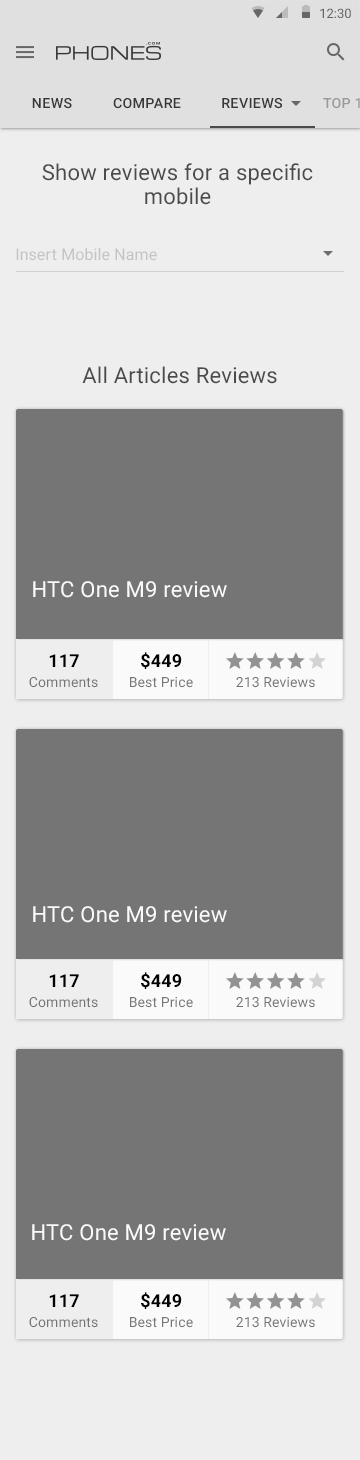
<style>
.page{position:relative;width:360px;height:1460px;background:#757575}
.page>*{position:absolute;margin:0}
.t1{font:14px "Roboto-Medium";letter-spacing:0.01em;color:#373737}
.t2{font:22px/24px "Roboto-Regular";letter-spacing:0.01em;color:#4b4b4b}
.t3{font:16px "Roboto-Regular";letter-spacing:0.01em;color:#c4c4c4}
.t4{font:22px "Roboto-Regular";letter-spacing:0.01em;color:#4b4b4b}
.t5{font:22px "Roboto-Regular";letter-spacing:0.01em;color:#fafafa}
.t6{font:18px "Roboto-Bold";letter-spacing:0.01em;color:#000000}
.t7{font:14px "Roboto-Regular";letter-spacing:0.01em;color:#757575}
</style>
<div class="page">
<p class="t1" style="left:32px;top:98px;width:40px;height:11px">NEWS</p>
<p class="t1" style="left:113px;top:98px;width:68px;height:11px">COMPARE</p>
<p class="t1" style="left:222px;top:98px;width:60px;height:11px">REVIEWS</p>
<p class="t2" style="left:42px;top:163px;width:271px;height:42px;text-align:center">Show reviews for a specific<br>mobile</p>
<p class="t3" style="left:16px;top:248px;width:141px;height:13px">Insert Mobile Name</p>
<p class="t4" style="left:82px;top:366px;width:195px;height:18px">All Articles Reviews</p>
<p class="t5" style="left:33px;top:581px;width:194px;height:17px">HTC One M9 review</p>
<p class="t6" style="left:49px;top:654px;width:30px;height:13px">117</p>
<p class="t6" style="left:141px;top:652px;width:41px;height:17px">$449</p>
<p class="t7" style="left:29px;top:677px;width:69px;height:11px">Comments</p>
<p class="t7" style="left:130px;top:677px;width:63px;height:11px">Best Price</p>
<p class="t7" style="left:236px;top:677px;width:79px;height:11px">213 Reviews</p>
<p class="t5" style="left:33px;top:906px;width:194px;height:17px">HTC One M9 review</p>
<p class="t6" style="left:49px;top:974px;width:30px;height:13px">117</p>
<p class="t6" style="left:141px;top:972px;width:41px;height:17px">$449</p>
<p class="t7" style="left:29px;top:997px;width:69px;height:11px">Comments</p>
<p class="t7" style="left:130px;top:997px;width:63px;height:11px">Best Price</p>
<p class="t7" style="left:236px;top:997px;width:79px;height:11px">213 Reviews</p>
<p class="t5" style="left:32px;top:1224px;width:194px;height:17px">HTC One M9 review</p>
<p class="t6" style="left:49px;top:1294px;width:30px;height:13px">117</p>
<p class="t6" style="left:141px;top:1292px;width:41px;height:17px">$449</p>
<p class="t7" style="left:29px;top:1317px;width:69px;height:11px">Comments</p>
<p class="t7" style="left:130px;top:1317px;width:63px;height:11px">Best Price</p>
<p class="t7" style="left:236px;top:1317px;width:79px;height:11px">213 Reviews</p>
</div>
